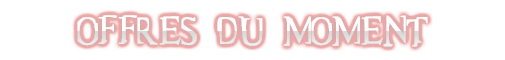
<style>
.page{position:relative;width:505px;height:60px;background:#ffffff}
.page>*{position:absolute;margin:0}
.t1{font:48px "matrix"}
</style>
<div class="page">
<p class="t1" style="left:77px;top:15px;width:351px;height:32px">offres du moment</p>
</div>
